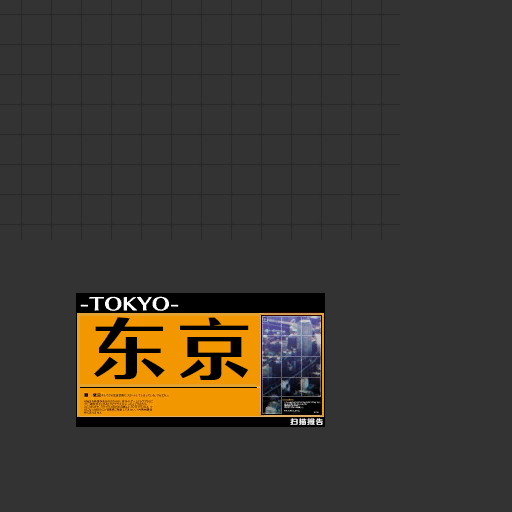
<style>
.page{position:relative;width:512px;height:512px;background:#333333}
.page>*{position:absolute;margin:0}
.t1{font:68px "FZYASHS_CU--GB1-0";letter-spacing:0.14em;color:#000000;scale:1.1 1}
.t2{font:6.7px "FZFW-QingYinTiS-B--GB1-0";letter-spacing:0.14em;color:#ffffff;scale:1.1 1}
</style>
<div class="page">
<p class="t1" style="left:94px;top:317px;width:155px;height:63px">东京</p>
<p class="t2" style="left:290px;top:418px;width:33px;height:7px">扫描报告</p>
</div>
